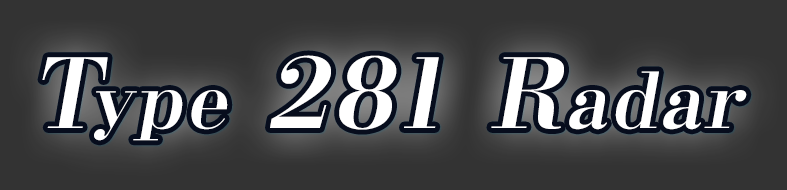
<style>
.page{position:relative;width:787px;height:190px;background:#333333}
.page>*{position:absolute;margin:0}
.t1{font:96px "KochoStd-Heavy";letter-spacing:0.04em;color:#ffffff;font-style:italic}
.t2{font:76.8px "KochoStd-Heavy";letter-spacing:0.04em;color:#ffffff;font-style:italic}
</style>
<div class="page">
<p class="t1" style="left:42px;top:55px;width:705px;height:86px">T<span class="t2">ype</span> 281 R<span class="t2">adar</span></p>
</div>
